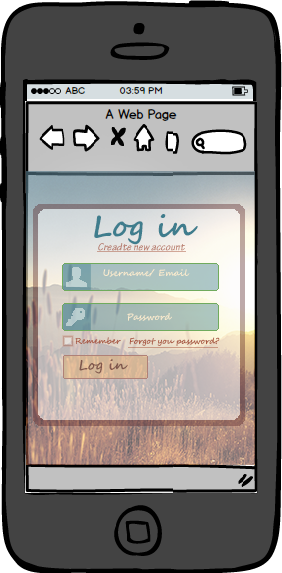
<style>
.page{position:relative;width:282px;height:573px;background:#434343}
.page>*{position:absolute;margin:0}
.t1{font:30px "SegoeScript-Bold";color:#3f7d8d}
.t2{font:11px "TektonPro-BoldObl";color:#b67b6c}
.t3{font:9px "SegoeScript-Bold";color:#f9eacd}
.t4{font:8px "SegoeScript";color:#ab5d48}
.t5{font:8px "SegoeScript";color:#a54e36}
.t6{font:14px "SegoeScript-Bold";color:#80574d}
</style>
<div class="page">
<p class="t1" style="left:94px;top:214px;width:104px;height:31px">Log in</p>
<p class="t2" style="left:98px;top:243px;width:87px;height:8px">Creadte new account</p>
<p class="t3" style="left:103px;top:269px;width:87px;height:8px">Username/ Email</p>
<p class="t3" style="left:127px;top:313px;width:45px;height:8px">Password</p>
<p class="t4" style="left:75px;top:337px;width:46px;height:8px">Remember</p>
<p class="t5" style="left:129px;top:337px;width:91px;height:9px;opacity:0.94">Forgot you password?</p>
<p class="t6" style="left:79px;top:359px;width:49px;height:15px">Log in</p>
</div>
